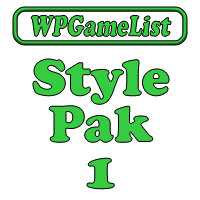
<style>
.page{position:relative;width:200px;height:200px;background:#ffffff}
.page>*{position:absolute;margin:0}
.t1{font:29.8px "CooperBlack";color:#36cb40;font-style:italic;scale:0.72 1}
.t2{font:53px/46.5px "CooperBlack";color:#36cb40}
</style>
<div class="page">
<p class="t1" style="left:31px;top:15px;width:140px;height:22px">WPGameList</p>
<p class="t2" style="left:33px;top:59px;width:136px;height:130px;text-align:center">Style<br>Pak<br>1</p>
</div>
